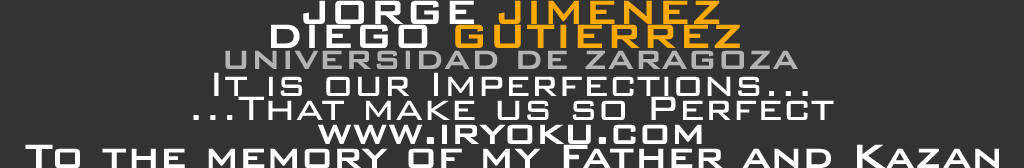
<style>
.page{position:relative;width:1024px;height:168px;background:#333333}
.page>*{position:absolute;margin:0}
.t1{font:45px "BankGothicBT-Medium";color:#fea900}
.t2{font:45px "BankGothicBT-Medium";color:#ffffff}
.t3{font:35px "BankGothicBT-Medium";color:#b3b3b3}
.t4{font:45px "BankGothicBT-Light";color:#ffffff}
</style>
<div class="page">
<p class="t1" style="left:303px;top:0px;width:417px;height:24px"><span class="t2">JORGE </span>JIMENEZ</p>
<p class="t1" style="left:271px;top:24px;width:469px;height:24px"><span class="t2">DIEGO </span>GUTIERREZ</p>
<p class="t3" style="left:225px;top:50px;width:573px;height:19px">UNIVERSIDAD DE ZARAGOZA</p>
<p class="t4" style="left:214px;top:72px;width:594px;height:24px">It is our Imperfections...</p>
<p class="t4" style="left:193px;top:96px;width:641px;height:24px">...That make us so Perfect</p>
<p class="t2" style="left:318px;top:124px;width:384px;height:20px">www.iryoku.com</p>
<p class="t2" style="left:25px;top:144px;width:974px;height:24px">To the memory of my Father and Kazan</p>
</div>
